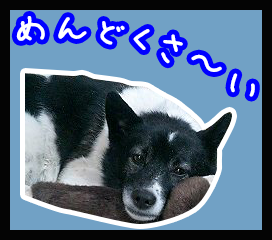
<style>
.page{position:relative;width:272px;height:240px;background:#71a1c5}
.page>*{position:absolute;margin:0}
.t1{font:45.1px "APJapanesefont";color:#ffffff}
</style>
<div class="page">
<p class="t1" style="left:16px;top:16px;width:239px;height:81px;rotate:16deg">めんどくさ～い</p>
</div>
